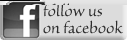
<style>
.page{position:relative;width:127px;height:40px;background:#dcdcdc}
.page>*{position:absolute;margin:0}
.t1{font:19px/17px "SanvitoPro-Regular";letter-spacing:-0.01em;color:#2e2e2e}
</style>
<div class="page">
<p class="t1" style="left:43px;top:3px;width:80px;height:31px">follow us<br>on facebook</p>
</div>
